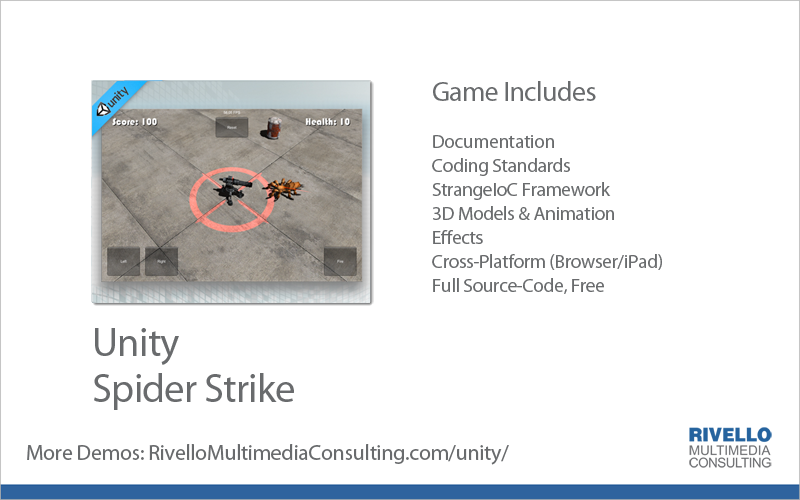
<style>
.page{position:relative;width:800px;height:500px;background:#ffffff}
.page>*{position:absolute;margin:0}
.t1{font:19.4px/23.9px "MyriadPro-Regular";letter-spacing:-0.02em;color:#696b6d}
.t2{font:27.8px/23.9px "MyriadPro-Regular";letter-spacing:-0.02em;color:#696b6d}
.t3{font:40.6px/46.7px "MyriadPro-Regular";letter-spacing:-0.02em;color:#696b6d}
.t4{font:22.2px "MyriadPro-Regular";letter-spacing:-0.02em;color:#696b6d}
</style>
<div class="page">
<p class="t1" style="left:432px;top:81px;width:230px;height:213px"><span class="t2">Game Includes <br></span><br>Documentation<br>Coding Standards<br>StrangeIoC Framework<br>3D Models &amp; Animation<br>Effects<br>Cross-Platform (Browser/iPad)<br>Full Source-Code, Free</p>
<p class="t3" style="left:94px;top:328px;width:200px;height:82px">Unity  <br>Spider Strike</p>
<p class="t4" style="left:27px;top:444px;width:482px;height:21px">More Demos: RivelloMultimediaConsulting.com/unity/</p>
</div>
